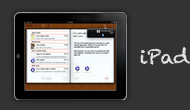
<style>
.page{position:relative;width:190px;height:110px;background:#333333}
.page>*{position:absolute;margin:0}
.t1{font:19.2px "Chalkduster";letter-spacing:-0.05em;color:#e5e5e5;scale:1.06 1}
</style>
<div class="page">
<p class="t1" style="left:140px;top:47px;width:50px;height:18px">iPad</p>
</div>
